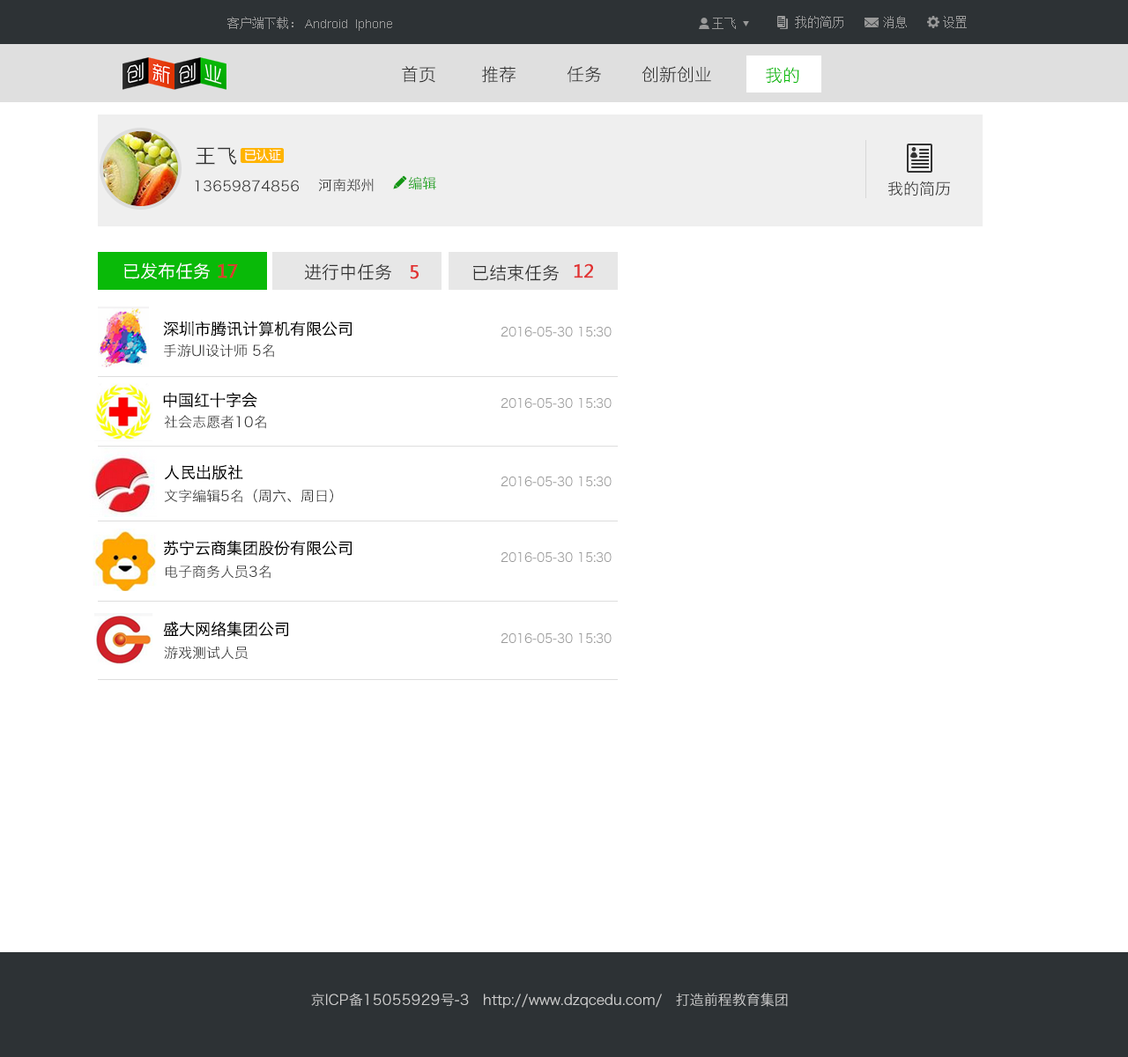
<style>
.page{position:relative;width:1128px;height:1057px;background:#ffffff}
.page>*{position:absolute;margin:0}
.t1{font:12.3px "SimSun";color:#999999}
.t2{font:12.3px "ArialMT";color:#999999}
.t3{font:17.6px "HiraginoSansGB-W3";color:#333333}
.t4{font:17.6px "HiraginoSansGB-W3";color:#09ba08}
.t5{font:21.1px "HiraginoSansGB-W3";color:#333333}
.t6{font:12.3px "MicrosoftYaHei";color:#ffffff}
.t7{font:14.1px "HiraginoSansGB-W3";color:#333333}
.t8{font:14.1px "HiraginoSansGB-W3";color:#10a110}
.t9{font:15.9px "HiraginoSansGB-W3";color:#333333}
.t10{font:17.6px "STHeitiSC-Light";color:#ffffff}
.t11{font:17.6px "MicrosoftYaHei";color:#e13131;font-weight:bold}
.t12{font:17.6px "STHeitiSC-Light";color:#333333}
.t13{font:15.9px "HiraginoSansGB-W3";color:#000000}
.t14{font:12.3px "HiraginoSansGB-W3";color:#999999}
.t15{font:14.1px "HiraginoSansGB-W3";color:#cccccc}
</style>
<div class="page">
<p class="t1" style="left:227px;top:17px;width:66px;height:12px">客户端下载：</p>
<p class="t1" style="left:712px;top:18px;width:24px;height:11px">王飞</p>
<p class="t1" style="left:795px;top:16px;width:48px;height:12px">我的简历</p>
<p class="t1" style="left:883px;top:16px;width:24px;height:12px">消息</p>
<p class="t1" style="left:943px;top:16px;width:24px;height:12px">设置</p>
<p class="t2" style="left:305px;top:19px;width:87px;height:12px">Android  Iphone</p>
<p class="t3" style="left:402px;top:66px;width:33px;height:17px">首页</p>
<p class="t3" style="left:482px;top:66px;width:33px;height:17px">推荐</p>
<p class="t3" style="left:567px;top:66px;width:34px;height:17px">任务</p>
<p class="t3" style="left:641px;top:66px;width:70px;height:17px">创新创业</p>
<p class="t4" style="left:766px;top:67px;width:33px;height:17px">我的</p>
<p class="t5" style="left:196px;top:147px;width:41px;height:18px">王飞</p>
<p class="t6" style="left:245px;top:149px;width:36px;height:12px">已认证</p>
<p class="t7" style="left:195px;top:180px;width:104px;height:12px">13659874856</p>
<p class="t7" style="left:318px;top:179px;width:56px;height:13px">河南郑州</p>
<p class="t8" style="left:408px;top:176px;width:28px;height:14px">编辑</p>
<p class="t9" style="left:888px;top:181px;width:62px;height:15px">我的简历</p>
<p class="t10" style="left:124px;top:263px;width:86px;height:16px">已发布任务</p>
<p class="t11" style="left:218px;top:263px;width:20px;height:15px">17</p>
<p class="t12" style="left:304px;top:263px;width:87px;height:17px">进行中任务</p>
<p class="t11" style="left:410px;top:265px;width:9px;height:14px">5</p>
<p class="t12" style="left:473px;top:264px;width:86px;height:17px">已结束任务</p>
<p class="t11" style="left:574px;top:263px;width:19px;height:15px">12</p>
<p class="t13" style="left:163px;top:321px;width:189px;height:16px">深圳市腾讯计算机有限公司</p>
<p class="t14" style="left:500px;top:327px;width:111px;height:10px">2016-05-30 15:30</p>
<p class="t7" style="left:164px;top:344px;width:110px;height:14px">手游UI设计师 5名</p>
<p class="t13" style="left:163px;top:392px;width:94px;height:16px">中国红十字会</p>
<p class="t14" style="left:500px;top:398px;width:111px;height:10px">2016-05-30 15:30</p>
<p class="t7" style="left:164px;top:415px;width:102px;height:14px">社会志愿者10名</p>
<p class="t13" style="left:164px;top:464px;width:79px;height:16px">人民出版社</p>
<p class="t14" style="left:500px;top:477px;width:111px;height:9px">2016-05-30 15:30</p>
<p class="t7" style="left:164px;top:489px;width:169px;height:14px">文字编辑5名（周六、周日）</p>
<p class="t13" style="left:164px;top:540px;width:188px;height:16px">苏宁云商集团股份有限公司</p>
<p class="t14" style="left:500px;top:552px;width:111px;height:10px">2016-05-30 15:30</p>
<p class="t7" style="left:166px;top:565px;width:104px;height:14px">电子商务人员3名</p>
<p class="t13" style="left:163px;top:621px;width:125px;height:16px">盛大网络集团公司</p>
<p class="t14" style="left:500px;top:634px;width:111px;height:9px">2016-05-30 15:30</p>
<p class="t7" style="left:164px;top:646px;width:84px;height:14px">游戏测试人员</p>
<p class="t15" style="left:311px;top:993px;width:477px;height:16px">京ICP备15055929号-3   http://www.dzqcedu.com/   打造前程教育集团</p>
</div>
